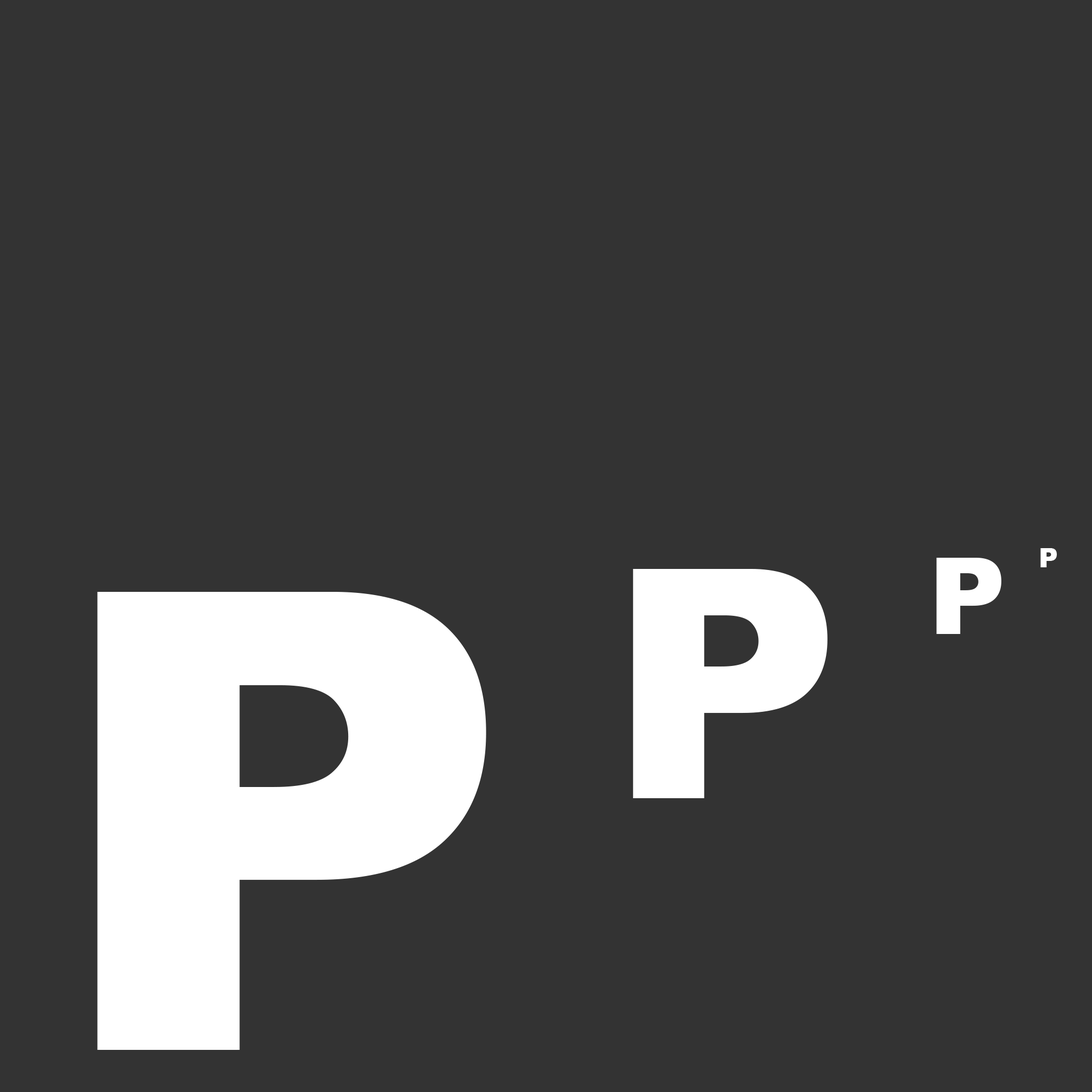
<style>
.page{position:relative;width:1092px;height:1092px;background:#333333}
.page>*{position:absolute;margin:0}
.t1{font:106.6px "Arial-Black";color:#ffffff}
.t2{font:26.7px "Arial-Black";color:#ffffff}
.t3{font:319.9px "Arial-Black";color:#ffffff}
.t4{font:639.8px "Arial-Black";color:#ffffff}
</style>
<div class="page">
<p class="t1" style="left:936px;top:558px;width:65px;height:76px">P</p>
<p class="t2" style="left:1040px;top:548px;width:17px;height:19px">P</p>
<p class="t3" style="left:633px;top:569px;width:195px;height:229px">P</p>
<p class="t4" style="left:97px;top:592px;width:389px;height:458px">P</p>
</div>
